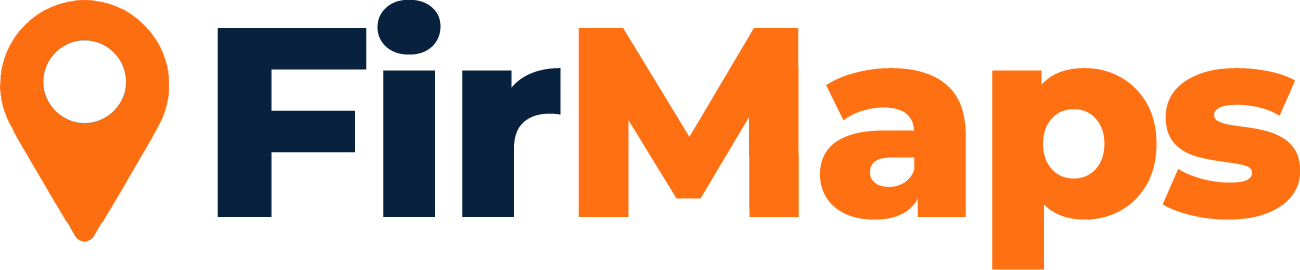
<style>
.page{position:relative;width:1300px;height:270px;background:#ffffff}
.page>*{position:absolute;margin:0}
.t1{font:270px "Montserrat-ExtraBold";letter-spacing:-0.02em;color:#fe7011}
.t2{font:270px "Montserrat-ExtraBold";letter-spacing:-0.02em;color:#08213e}
</style>
<div class="page">
<p class="t1" style="left:217px;top:0px;width:1084px;height:270px"><span class="t2">Fir</span>Maps</p>
</div>
